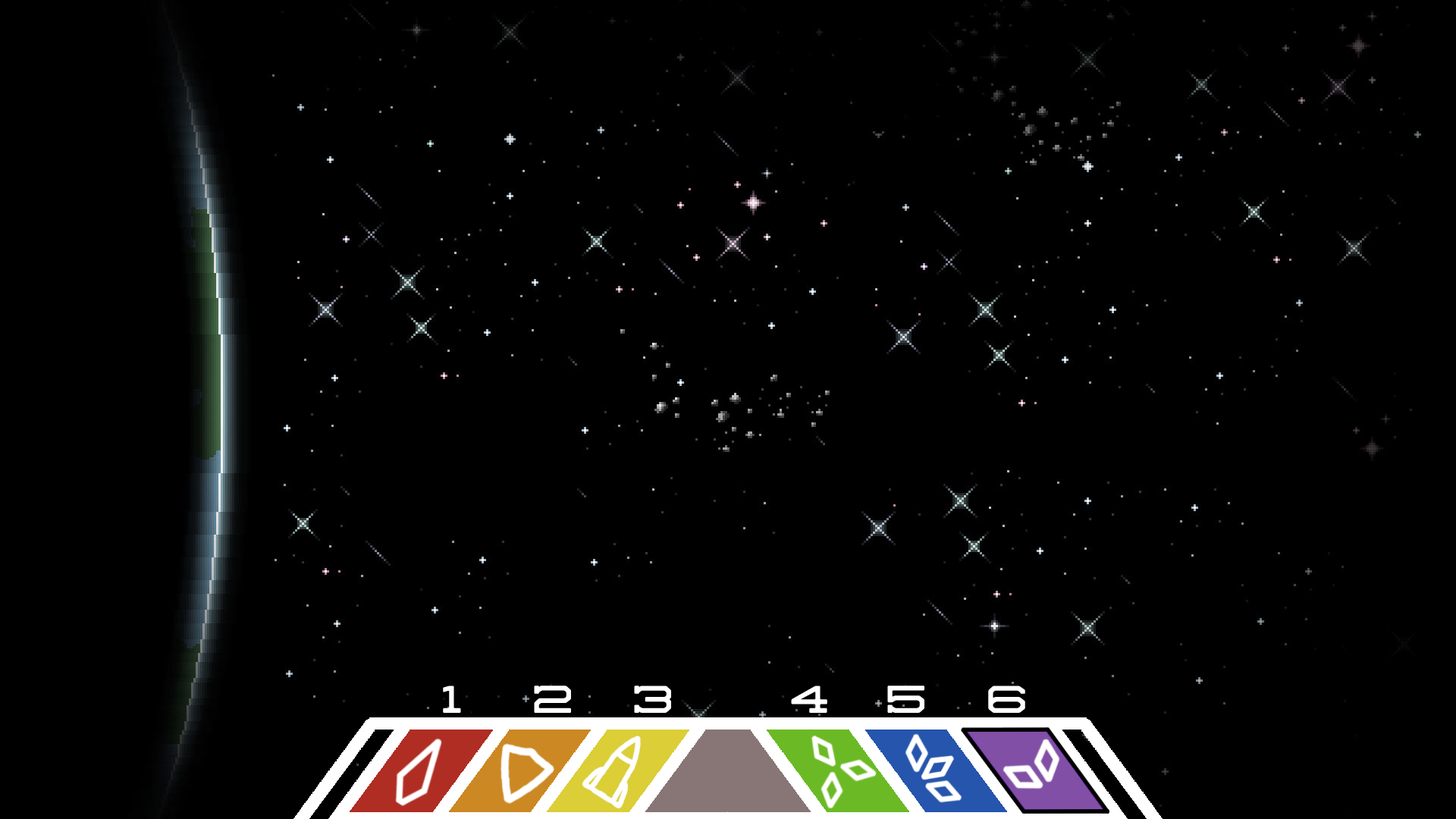
<style>
.page{position:relative;width:1456px;height:819px;background:#000000}
.page>*{position:absolute;margin:0}
.t1{font:42.5px "SedgwickCo";color:#ffffff}
</style>
<div class="page">
<p class="t1" style="left:443px;top:686px;width:18px;height:27px">1</p>
<p class="t1" style="left:534px;top:686px;width:38px;height:27px">2</p>
<p class="t1" style="left:634px;top:686px;width:38px;height:27px">3</p>
<p class="t1" style="left:791px;top:686px;width:36px;height:27px">4</p>
<p class="t1" style="left:887px;top:686px;width:38px;height:27px">5</p>
<p class="t1" style="left:988px;top:686px;width:37px;height:27px">6</p>
</div>
